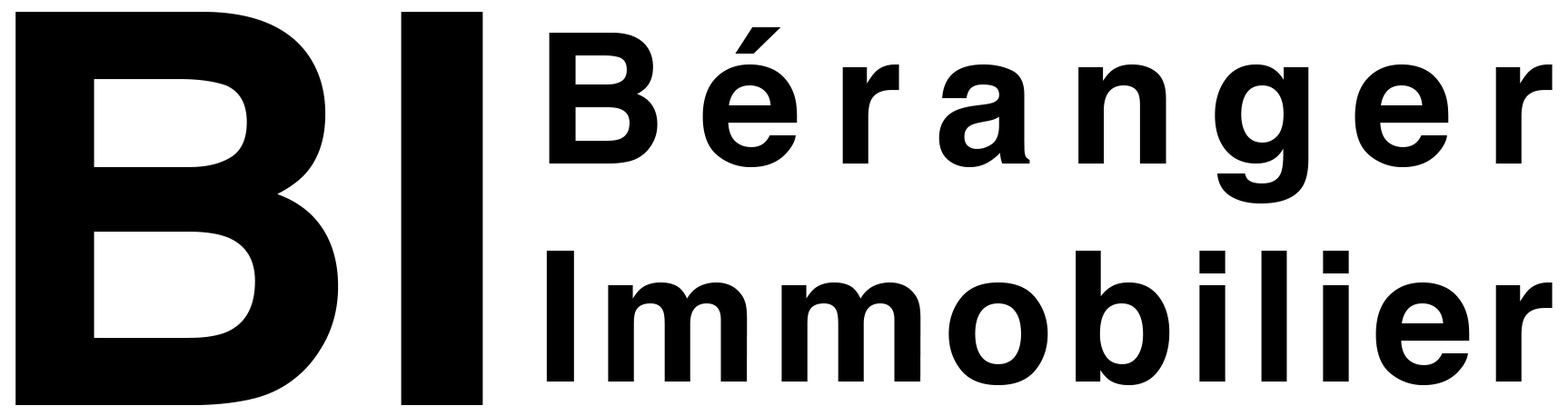
<style>
.page{position:relative;width:1568px;height:416px;background:#ffffff}
.page>*{position:absolute;margin:0}
.t1{font:545.1px "Helvetica-Bold";color:#000000}
.t2{font:181.7px "Helvetica-Bold";color:#000000}
</style>
<div class="page">
<p class="t1" style="left:15px;top:12px;width:468px;height:393px">BI</p>
<p class="t2" style="left:546px;top:27px;width:1007px;height:358px;text-align:justify">Béranger<br>Immobilier</p>
</div>
